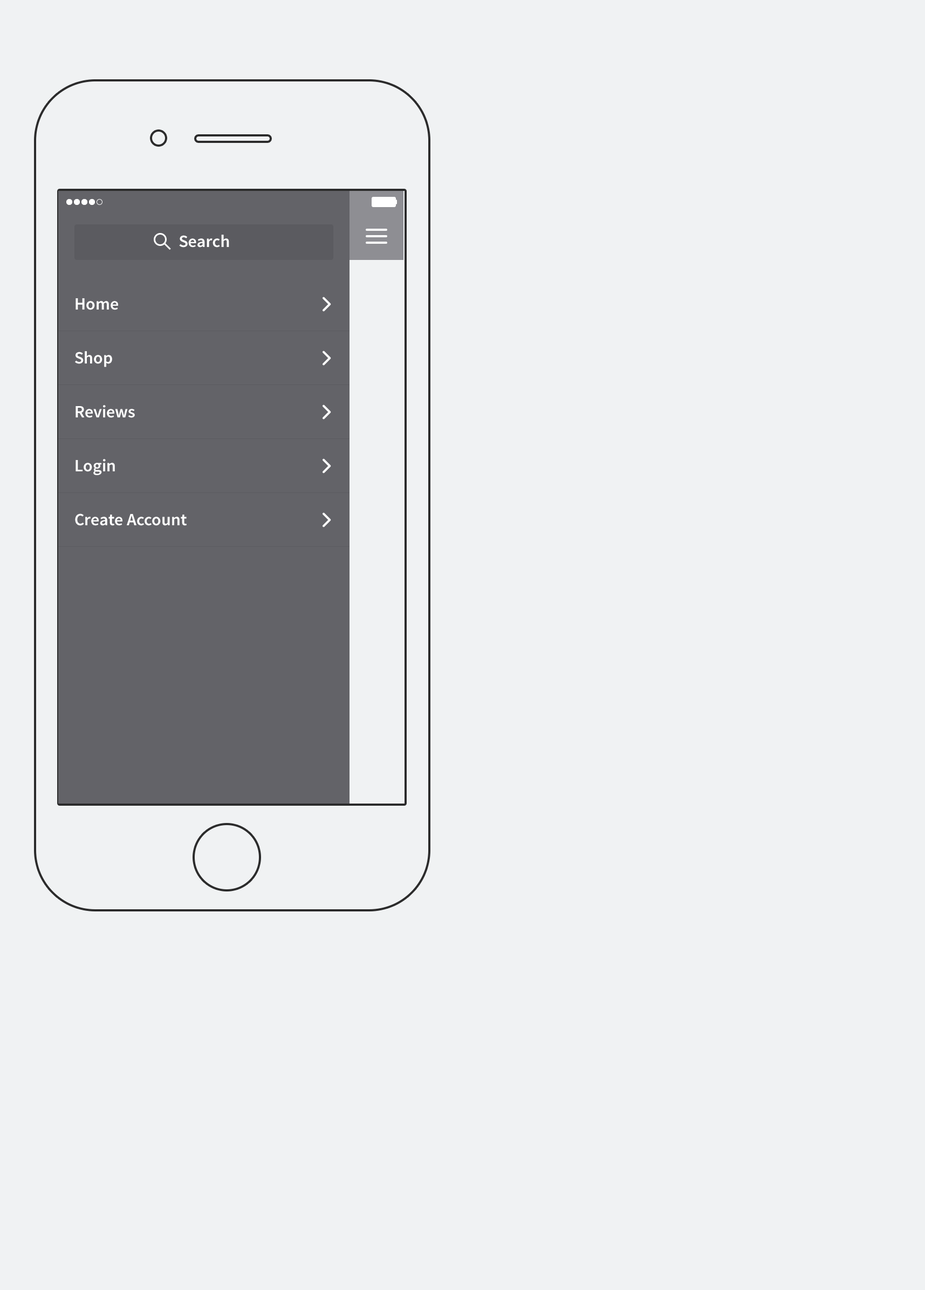
<style>
.page{position:relative;width:925px;height:1290px;background:#f0f2f3}
.page>*{position:absolute;margin:0}
.t1{font:17.3px "SourceSansPro-Semibold";color:#ffffff}
.t2{font:17.3px/53.9px "SourceSansPro-Semibold";color:#ffffff}
</style>
<div class="page">
<p class="t1" style="left:179px;top:235px;width:50px;height:12px">Search</p>
<p class="t2" style="left:75px;top:298px;width:112px;height:228px">Home<br>Shop<br>Reviews<br>Login<br>Create Account</p>
</div>
